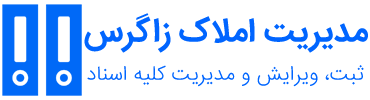
<style>
.page{position:relative;width:370px;height:100px;background:#ffffff}
.page>*{position:absolute;margin:0}
.t1{font:33.3px "IRANSans-Bold";color:#0065ff}
.t2{font:20.8px "IRANSans-Light";color:#0065ff}
</style>
<div class="page">
<p class="t1" style="left:84px;top:13px;width:284px;height:40px">مدیریت املاک زاگرس</p>
<p class="t2" style="left:87px;top:65px;width:277px;height:22px">ثبت، ویرایش و مدیریت کلیه اسناد</p>
</div>
